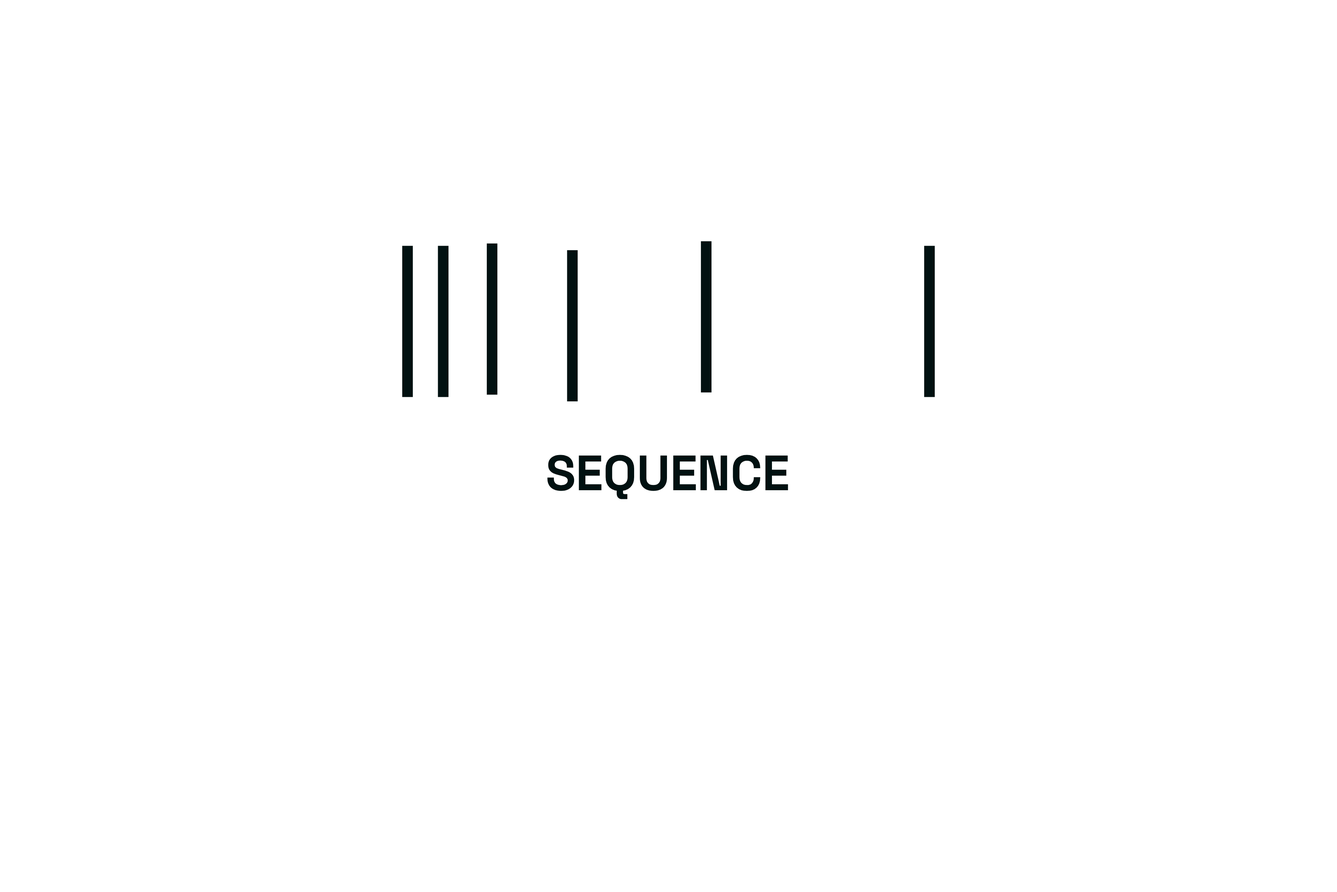
<style>
.page{position:relative;width:1337px;height:892px;background:#ffffff}
.page>*{position:absolute;margin:0}
.t1{font:49.5px "SpaceGroteskLight-Bold";color:#011111}
</style>
<div class="page">
<p class="t1" style="left:547px;top:454px;width:241px;height:45px">SEQUENCE</p>
</div>
